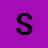
<style>
.page{position:relative;width:48px;height:48px;background:#a50cb3}
.page>*{position:absolute;margin:0}
.t1{font:30px "Roboto-Bold";color:#000000}
</style>
<div class="page">
<p class="t1" style="left:16px;top:13px;width:17px;height:22px">S</p>
</div>
